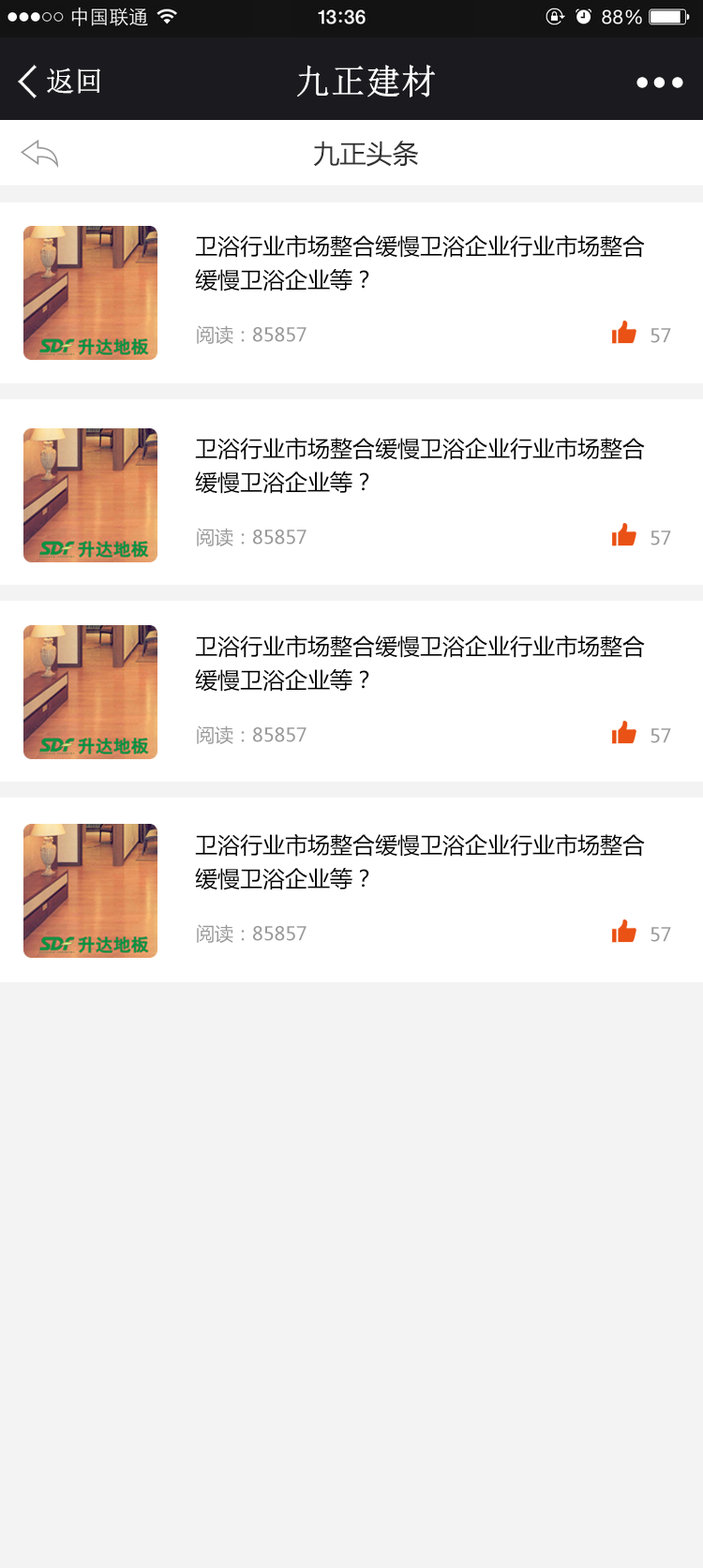
<style>
.page{position:relative;width:703px;height:1568px;background:#ffffff}
.page>*{position:absolute;margin:0}
.t1{font:34.4px "NSimSun";color:#ffffff;font-weight:bold}
.t2{font:28.1px "NSimSun";color:#ffffff;font-weight:bold}
.t3{font:26.2px "MicrosoftYaHei";color:#333333}
.t4{font:26.2px "MicrosoftYaHei";color:#333333;font-weight:bold}
.t5{font:22.5px/33.7px "MicrosoftYaHei";color:#000000}
.t6{font:18.7px "MicrosoftYaHei";color:#999999}
</style>
<div class="page">
<p class="t1" style="left:297px;top:65px;width:138px;height:32px">九正建材</p>
<p class="t2" style="left:47px;top:67px;width:53px;height:27px">返回</p>
<p class="t3" style="left:313px;top:141px;width:106px;height:26px"><span class="t4"><br></span>九正头条</p>
<p class="t5" style="left:195px;top:234px;width:450px;height:57px">卫浴行业市场整合缓慢卫浴企业行业市场整合<br>缓慢卫浴企业等？</p>
<p class="t6" style="left:197px;top:325px;width:109px;height:19px">阅读：85857</p>
<p class="t6" style="left:650px;top:328px;width:21px;height:15px">57</p>
<p class="t5" style="left:195px;top:437px;width:450px;height:57px">卫浴行业市场整合缓慢卫浴企业行业市场整合<br>缓慢卫浴企业等？</p>
<p class="t6" style="left:197px;top:528px;width:109px;height:18px">阅读：85857</p>
<p class="t6" style="left:650px;top:530px;width:21px;height:15px">57</p>
<p class="t5" style="left:195px;top:635px;width:450px;height:57px">卫浴行业市场整合缓慢卫浴企业行业市场整合<br>缓慢卫浴企业等？</p>
<p class="t6" style="left:197px;top:725px;width:109px;height:19px">阅读：85857</p>
<p class="t6" style="left:650px;top:728px;width:21px;height:15px">57</p>
<p class="t5" style="left:195px;top:833px;width:450px;height:57px">卫浴行业市场整合缓慢卫浴企业行业市场整合<br>缓慢卫浴企业等？</p>
<p class="t6" style="left:197px;top:924px;width:109px;height:19px">阅读：85857</p>
<p class="t6" style="left:650px;top:927px;width:21px;height:15px">57</p>
</div>
